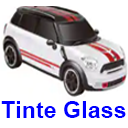
<style>
.page{position:relative;width:128px;height:128px;background:#ffffff}
.page>*{position:absolute;margin:0}
.t1{font:23.3px "Arial-BoldMT";color:#0000ff}
</style>
<div class="page">
<p class="t1" style="left:1px;top:101px;width:125px;height:17px">Tinte Glass</p>
</div>
